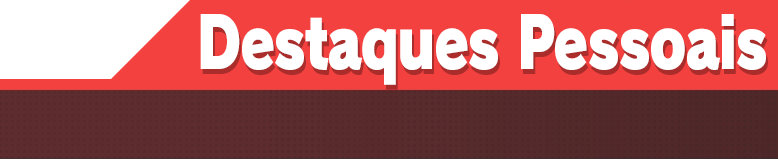
<style>
.page{position:relative;width:778px;height:160px;background:#f3413f}
.page>*{position:absolute;margin:0}
.t1{font:70.7px "RodinPro-UB";letter-spacing:-0.036em;color:#ffffff;scale:0.79 1}
</style>
<div class="page">
<p class="t1" style="left:200px;top:14px;width:566px;height:71px">Destaques Pessoais</p>
</div>
